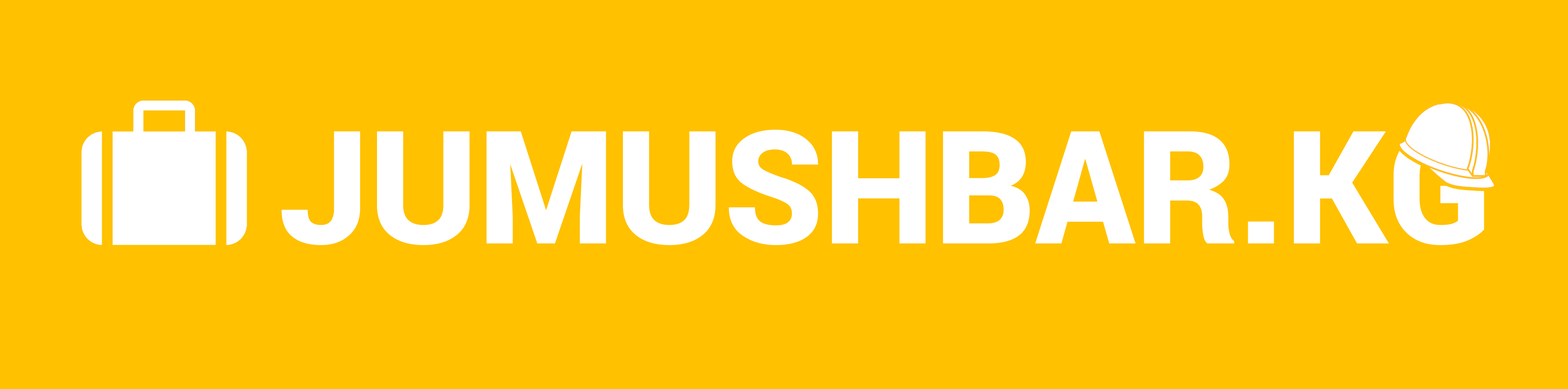
<style>
.page{position:relative;width:1568px;height:389px;background:#ffc100}
.page>*{position:absolute;margin:0}
.t1{font:157.5px "Roboto-Black";color:#ffffff}
</style>
<div class="page">
<p class="t1" style="left:281px;top:130px;width:1203px;height:115px">JUMUSHBAR.KG</p>
</div>
